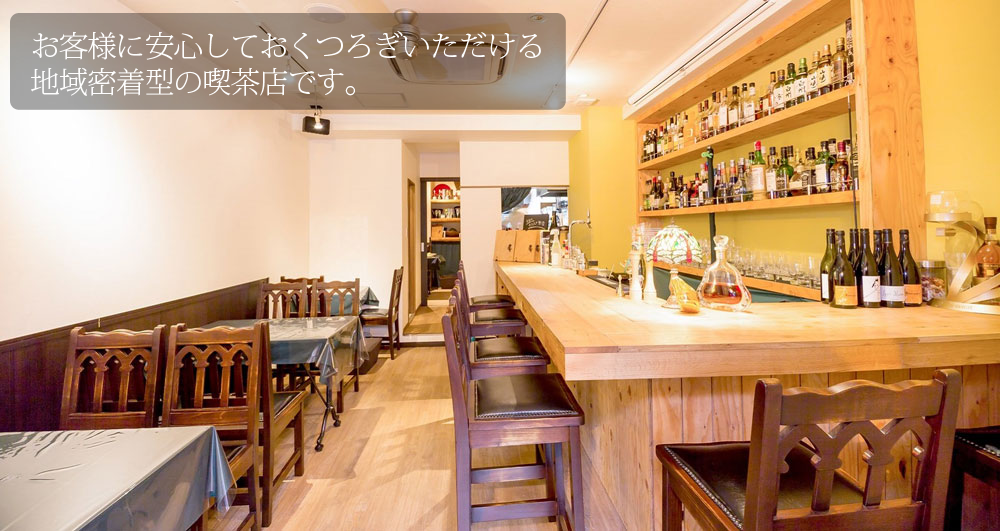
<style>
.page{position:relative;width:1000px;height:531px}
.page>*{position:absolute;margin:0}
.t1{font:29.4px/36px "KozMinPro-ExtraLight";letter-spacing:-0.03em;color:#fefefe}
</style>
<div class="page">
<p class="t1" style="left:31px;top:31px;width:510px;height:65px">お客様に安心しておくつろぎいただける<br>地域密着型の喫茶店です。</p>
</div>
